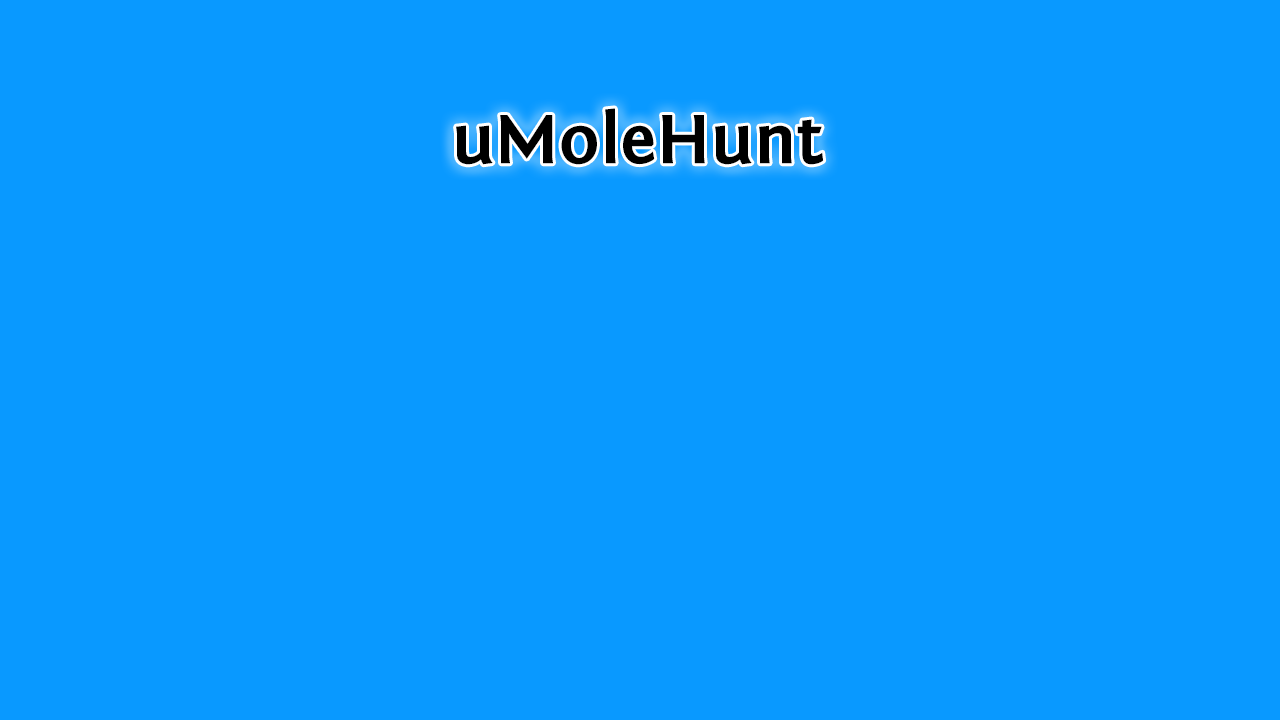
<style>
.page{position:relative;width:1280px;height:720px;background:#0999ff}
.page>*{position:absolute;margin:0}
.t1{font:72px "FontinSans-Bold";color:#000000}
</style>
<div class="page">
<p class="t1" style="left:456px;top:108px;width:368px;height:57px">uMoleHunt</p>
</div>
